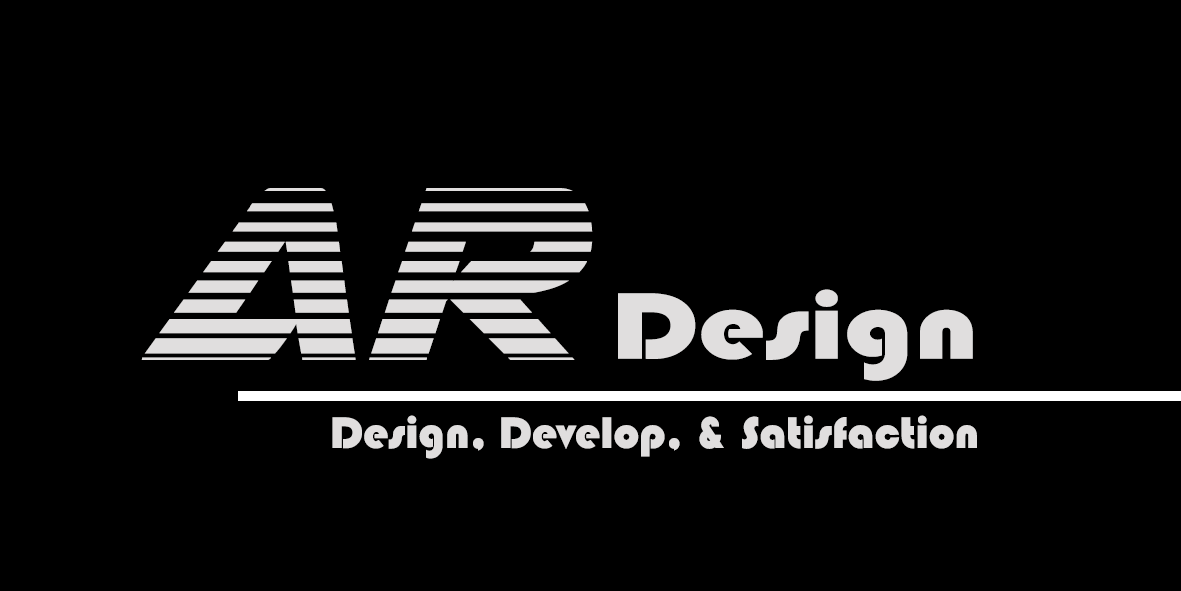
<style>
.page{position:relative;width:1181px;height:591px;background:#000000}
.page>*{position:absolute;margin:0}
.t1{font:324.1px "AirstrikeGradient";color:#e0dede;scale:0.92 1}
.t2{font:97.8px "Bauhaus93";color:#e0dede;scale:1.23 1}
.t3{font:45.8px "Bauhaus93";color:#e0dede}
</style>
<div class="page">
<p class="t1" style="left:141px;top:188px;width:452px;height:172px">AR</p>
<p class="t2" style="left:618px;top:289px;width:355px;height:92px">Design</p>
<p class="t3" style="left:332px;top:415px;width:645px;height:44px">Design, Develop, &amp; Satisfaction</p>
</div>
